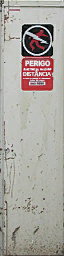
<style>
.page{position:relative;width:64px;height:256px}
.page>*{position:absolute;margin:0}
.t1{font:7.1px "MHeiPRC-Xbold";letter-spacing:-0.04em;color:#def3f7;scale:0.91 1}
.t2{font:6.7px "Padauk-Regular";letter-spacing:-0.04em;color:#def3f7;scale:0.94 1}
.t3{font:6.7px "TimesNewRomanPSMT";letter-spacing:-0.04em;color:#def3f7;scale:0.94 1}
</style>
<div class="page">
<p class="t1" style="left:25px;top:60px;width:26px;height:7px">PERIGO</p>
<p class="t2" style="left:23px;top:70px;width:28px;height:7px">DIST<span class="t3">Â</span>NCIA</p>
</div>
